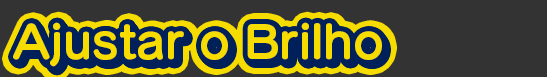
<style>
.page{position:relative;width:547px;height:77px;background:#333333}
.page>*{position:absolute;margin:0}
.t1{font:45px "SeuratPro-B";color:#f7dc00}
</style>
<div class="page">
<p class="t1" style="left:13px;top:22px;width:369px;height:45px">Ajustar o Brilho</p>
<p class="t1" style="left:14px;top:24px;width:369px;height:45px">Ajustar o Brilho</p>
<p class="t1" style="left:14px;top:23px;width:369px;height:45px">Ajustar o Brilho</p>
<p class="t1" style="left:14px;top:22px;width:369px;height:45px">Ajustar o Brilho</p>
</div>
